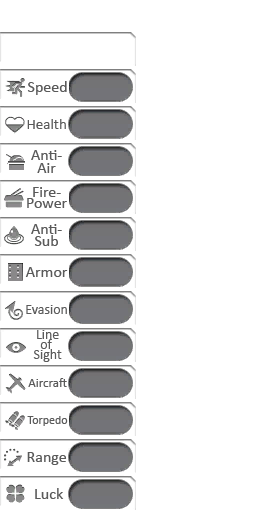
<style>
.page{position:relative;width:256px;height:512px;background:#ffffff}
.page>*{position:absolute;margin:0}
.t1{font:16px "Calibri";color:#5a5a5a}
.t2{font:15px "Calibri";color:#5a5a5a}
.t3{font:16px/13px "Calibri";color:#5a5a5a}
.t4{font:16px/11px "Calibri";color:#5a5a5a}
.t5{font:16px/12px "Calibri";color:#5a5a5a}
.t6{font:14px "Calibri";color:#5a5a5a}
.t7{font:14px/10px "Calibri";color:#5a5a5a}
.t8{font:13px "Calibri";color:#5a5a5a}
.t9{font:12px "Calibri";color:#5a5a5a}
</style>
<div class="page">
<p class="t1" style="left:27px;top:81px;width:40px;height:14px">Speed</p>
<p class="t2" style="left:27px;top:119px;width:39px;height:10px">Health</p>
<p class="t3" style="left:31px;top:150px;width:31px;height:23px;text-align:center">Anti-<br>Air</p>
<p class="t4" style="left:27px;top:187px;width:40px;height:21px;text-align:center">Fire-<br>Power</p>
<p class="t5" style="left:31px;top:224px;width:31px;height:22px;text-align:center">Anti-<br>Sub</p>
<p class="t1" style="left:25px;top:267px;width:43px;height:10px">Armor</p>
<p class="t6" style="left:26px;top:305px;width:41px;height:9px">Evasion</p>
<p class="t7" style="left:33px;top:330px;width:29px;height:32px;text-align:center">Line<br>of <br>Sight</p>
<p class="t8" style="left:28px;top:378px;width:39px;height:9px">Aircraft</p>
<p class="t9" style="left:27px;top:416px;width:41px;height:10px">Torpedo</p>
<p class="t1" style="left:27px;top:452px;width:40px;height:13px">Range</p>
<p class="t1" style="left:35px;top:488px;width:29px;height:11px">Luck</p>
</div>
